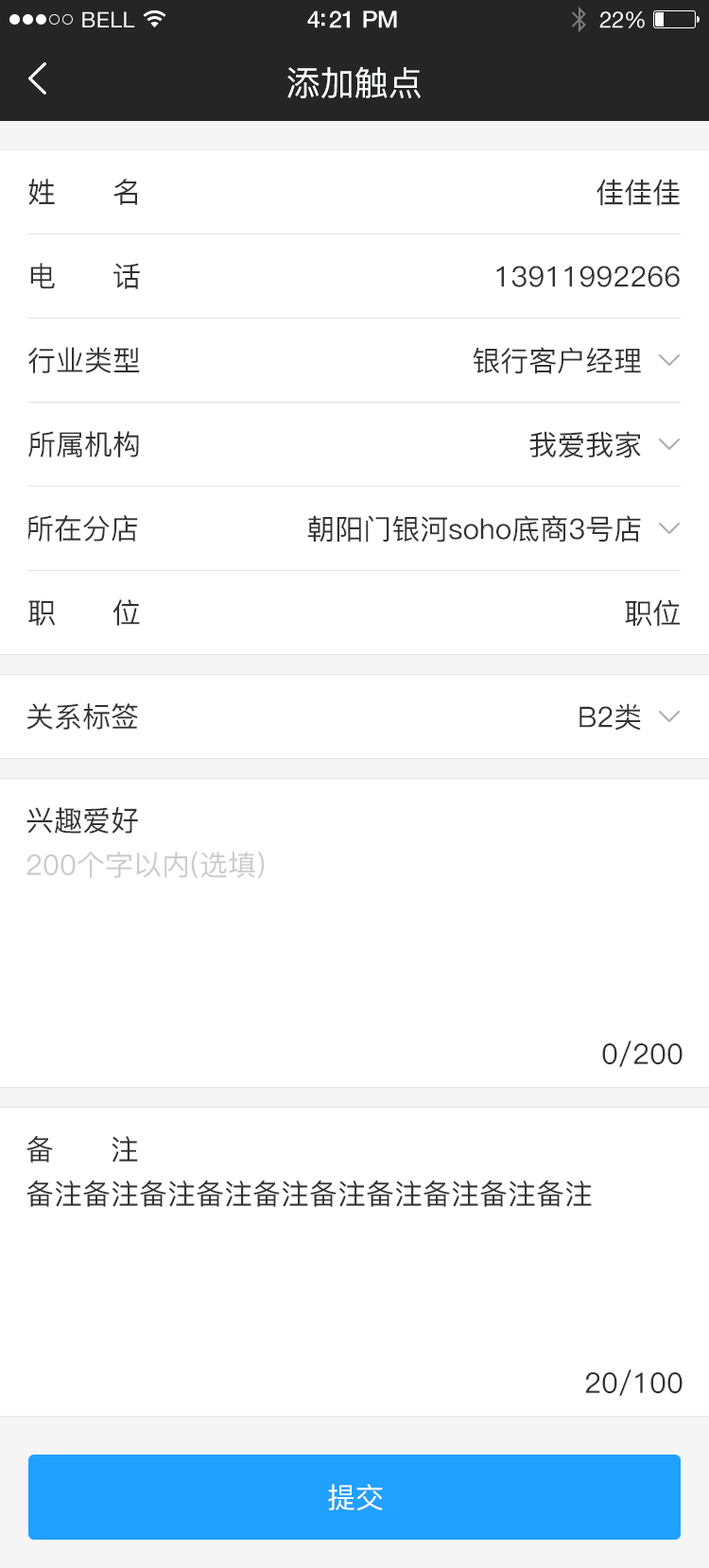
<style>
.page{position:relative;width:709px;height:1568px;background:#ffffff}
.page>*{position:absolute;margin:0}
.t1{font:21.7px "HelveticaNeue";letter-spacing:0.02em;color:#ffffff}
.t2{font:23.6px "HelveticaNeue-Medium";letter-spacing:-0.02em;color:#ffffff}
.t3{font:22.7px "HelveticaNeue";letter-spacing:-0.02em;color:#ffffff}
.t4{font:34px "PingFang-SC-Medium";color:#feffff}
.t5{font:28.4px "PingFang-SC-Medium";color:#333333}
.t6{font:28.4px "PingFang-SC-Medium";color:#cccccc}
.t7{font:28.4px "PingFang-SC-Medium";color:#ffffff}
</style>
<div class="page">
<p class="t1" style="left:82px;top:11px;width:53px;height:16px">BELL</p>
<p class="t2" style="left:307px;top:10px;width:90px;height:18px">4:21 PM</p>
<p class="t3" style="left:599px;top:11px;width:46px;height:17px">22%</p>
<p class="t4" style="left:287px;top:66px;width:134px;height:32px">添加触点</p>
<p class="t5" style="left:28px;top:179px;width:109px;height:26px">姓      名</p>
<p class="t5" style="left:596px;top:179px;width:84px;height:27px">佳佳佳</p>
<p class="t5" style="left:30px;top:263px;width:110px;height:26px">电      话</p>
<p class="t5" style="left:496px;top:266px;width:184px;height:21px">13911992266</p>
<p class="t5" style="left:28px;top:347px;width:112px;height:26px">行业类型</p>
<p class="t5" style="left:473px;top:347px;width:168px;height:27px">银行客户经理</p>
<p class="t5" style="left:28px;top:431px;width:111px;height:26px">所属机构</p>
<p class="t5" style="left:529px;top:431px;width:112px;height:27px">我爱我家</p>
<p class="t5" style="left:26px;top:515px;width:112px;height:27px">所在分店</p>
<p class="t5" style="left:307px;top:515px;width:334px;height:28px">朝阳门银河soho底商3号店</p>
<p class="t5" style="left:28px;top:599px;width:112px;height:27px">职      位</p>
<p class="t5" style="left:625px;top:599px;width:55px;height:28px">职位</p>
<p class="t5" style="left:26px;top:703px;width:112px;height:27px">关系标签</p>
<p class="t5" style="left:579px;top:703px;width:62px;height:28px">B2类</p>
<p class="t5" style="left:26px;top:807px;width:112px;height:27px">兴趣爱好</p>
<p class="t6" style="left:26px;top:852px;width:239px;height:26px">200个字以内(选填)</p>
<p class="t5" style="left:602px;top:1041px;width:80px;height:26px">0/200</p>
<p class="t5" style="left:26px;top:1136px;width:112px;height:27px">备      注</p>
<p class="t5" style="left:26px;top:1180px;width:566px;height:27px">备注备注备注备注备注备注备注备注备注备注</p>
<p class="t5" style="left:585px;top:1370px;width:97px;height:26px">20/100</p>
<p class="t7" style="left:328px;top:1484px;width:55px;height:26px">提交</p>
</div>
